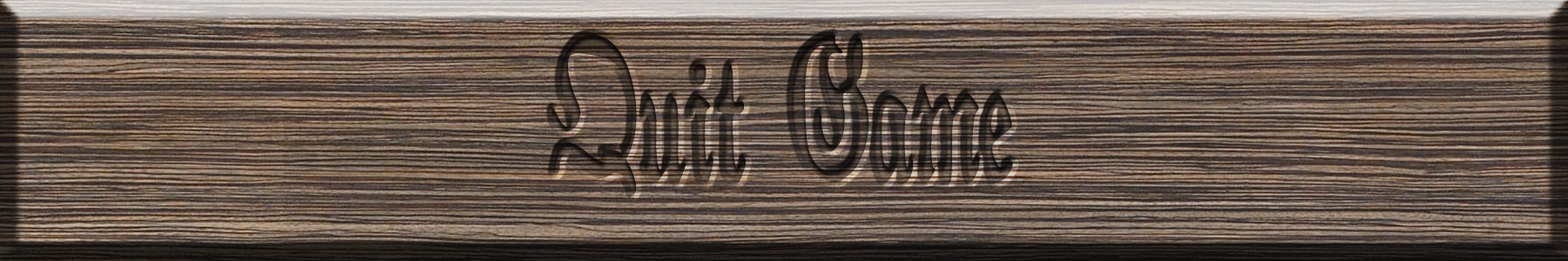
<style>
.page{position:relative;width:1568px;height:261px}
.page>*{position:absolute;margin:0}
.t1{font:326.7px "AuldMagick";scale:0.54 1}
</style>
<div class="page">
<p class="t1" style="left:551px;top:34px;width:462px;height:161px">Quit Game</p>
</div>
